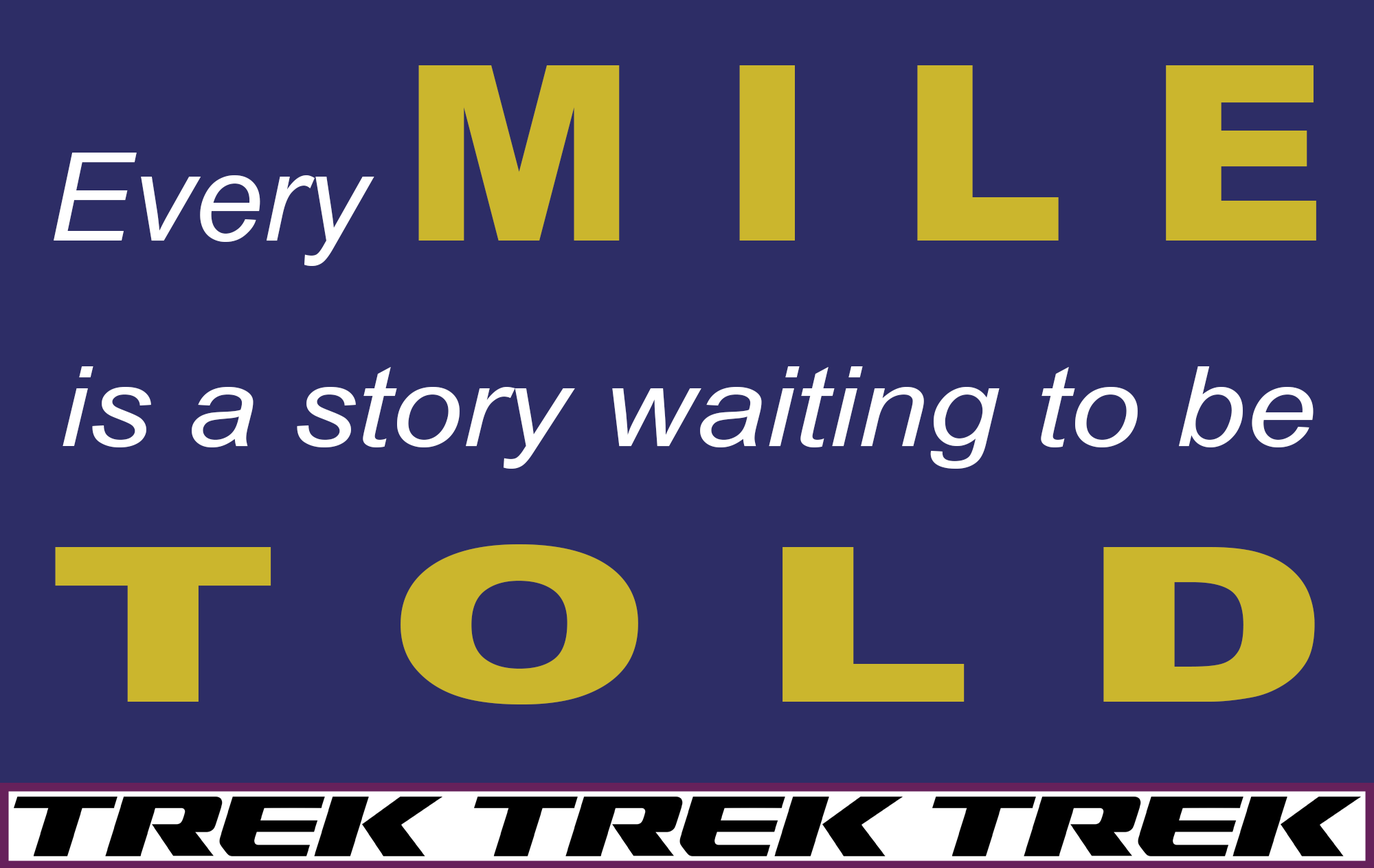
<style>
.page{position:relative;width:1374px;height:868px;background:#2d2d66}
.page>*{position:absolute;margin:0}
.t1{font:244.8px "Arial-Black";color:#cbb62d}
.t2{font:122.4px "Arial-ItalicMT";color:#ffffff}
.t3{font:111.2px "Arial-ItalicMT";color:#ffffff;scale:1.14 1}
.t4{font:215.9px "Arial-Black";color:#cbb62d;scale:1.48 1}
</style>
<div class="page">
<p class="t1" style="left:54px;top:65px;width:1262px;height:201px"><span class="t2">Every </span>M I L E</p>
<p class="t3" style="left:63px;top:366px;width:1251px;height:103px">is a story waiting to be</p>
<p class="t4" style="left:55px;top:544px;width:1260px;height:160px">T O L D</p>
</div>
